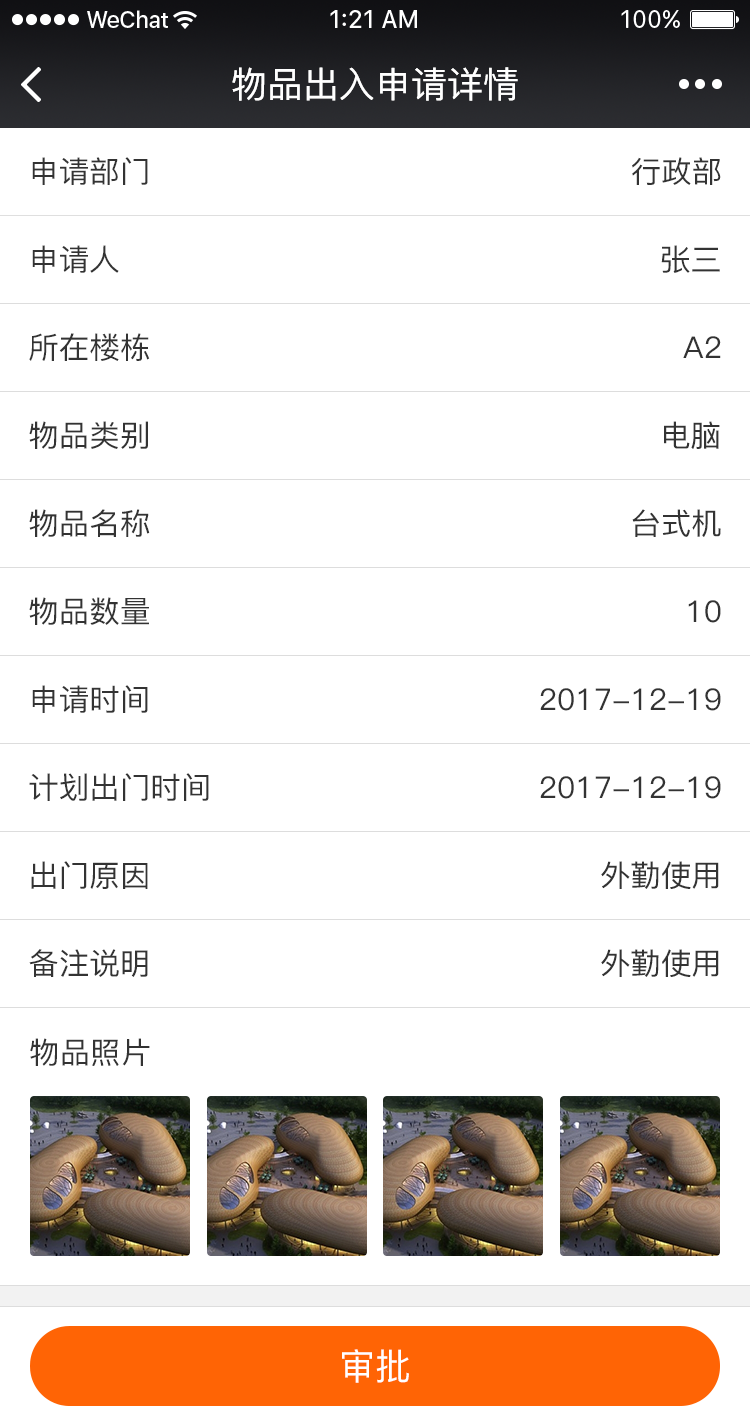
<style>
.page{position:relative;width:750px;height:1426px;background:#ffffff}
.page>*{position:absolute;margin:0}
.t1{font:36px "PingFang-SC-Medium";color:#ffffff}
.t2{font:30px "PingFang-SC-Medium";color:#333333}
.t3{font:29.9px "PingFang-SC-Medium";color:#333333}
</style>
<div class="page">
<p class="t1" style="left:232px;top:67px;width:286px;height:34px">物品出入申请详情</p>
<p class="t2" style="left:32px;top:157px;width:116px;height:28px">申请部门</p>
<p class="t2" style="left:632px;top:157px;width:89px;height:28px">行政部</p>
<p class="t2" style="left:32px;top:245px;width:87px;height:28px">申请人</p>
<p class="t2" style="left:661px;top:245px;width:59px;height:28px">张三</p>
<p class="t2" style="left:29px;top:333px;width:121px;height:28px">所在楼栋</p>
<p class="t2" style="left:683px;top:336px;width:38px;height:22px">A2</p>
<p class="t2" style="left:29px;top:421px;width:119px;height:28px">物品类别</p>
<p class="t2" style="left:664px;top:421px;width:56px;height:28px">电脑</p>
<p class="t2" style="left:29px;top:509px;width:121px;height:28px">物品名称</p>
<p class="t2" style="left:632px;top:509px;width:89px;height:28px">台式机</p>
<p class="t2" style="left:29px;top:597px;width:120px;height:28px">物品数量</p>
<p class="t2" style="left:688px;top:600px;width:33px;height:23px">10</p>
<p class="t2" style="left:32px;top:685px;width:116px;height:28px">申请时间</p>
<p class="t2" style="left:540px;top:688px;width:181px;height:23px">2017-12-19</p>
<p class="t2" style="left:29px;top:773px;width:180px;height:28px">计划出门时间</p>
<p class="t2" style="left:540px;top:776px;width:181px;height:23px">2017-12-19</p>
<p class="t2" style="left:31px;top:861px;width:117px;height:28px">出门原因</p>
<p class="t2" style="left:601px;top:861px;width:118px;height:28px">外勤使用</p>
<p class="t2" style="left:29px;top:949px;width:119px;height:28px">备注说明</p>
<p class="t2" style="left:601px;top:949px;width:118px;height:28px">外勤使用</p>
<p class="t3" style="left:30px;top:1038px;width:120px;height:28px">物品照片</p>
<p class="t1" style="left:342px;top:1349px;width:67px;height:34px">审批</p>
</div>
